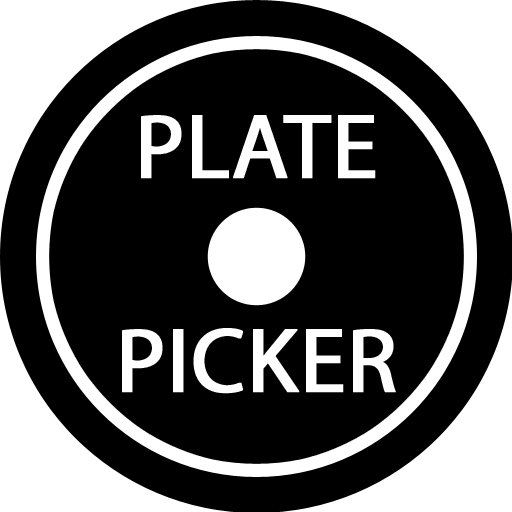
<style>
.page{position:relative;width:512px;height:512px;background:#000000}
.page>*{position:absolute;margin:0}
.t1{font:92px "MyriadPro-Regular";color:#ffffff;font-weight:bold}
</style>
<div class="page">
<p class="t1" style="left:141px;top:115px;width:235px;height:64px">PLATE</p>
<p class="t1" style="left:122px;top:328px;width:274px;height:66px">PICKER</p>
</div>
